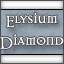
<style>
.page{position:relative;width:64px;height:64px}
.page>*{position:absolute;margin:0}
.t1{font:18px "Dark11";color:#ffffff}
</style>
<div class="page">
<p class="t1" style="left:0px;top:12px;width:64px;height:37px;text-align:center">Elysium<br>Diamond</p>
</div>
